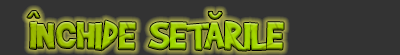
<style>
.page{position:relative;width:400px;height:55px;background:#333333}
.page>*{position:absolute;margin:0}
.t1{font:46px "Brady-Bunch"}
</style>
<div class="page">
<p class="t1" style="left:30px;top:20px;width:254px;height:31px">INCHIDE SETARILE</p>
</div>
